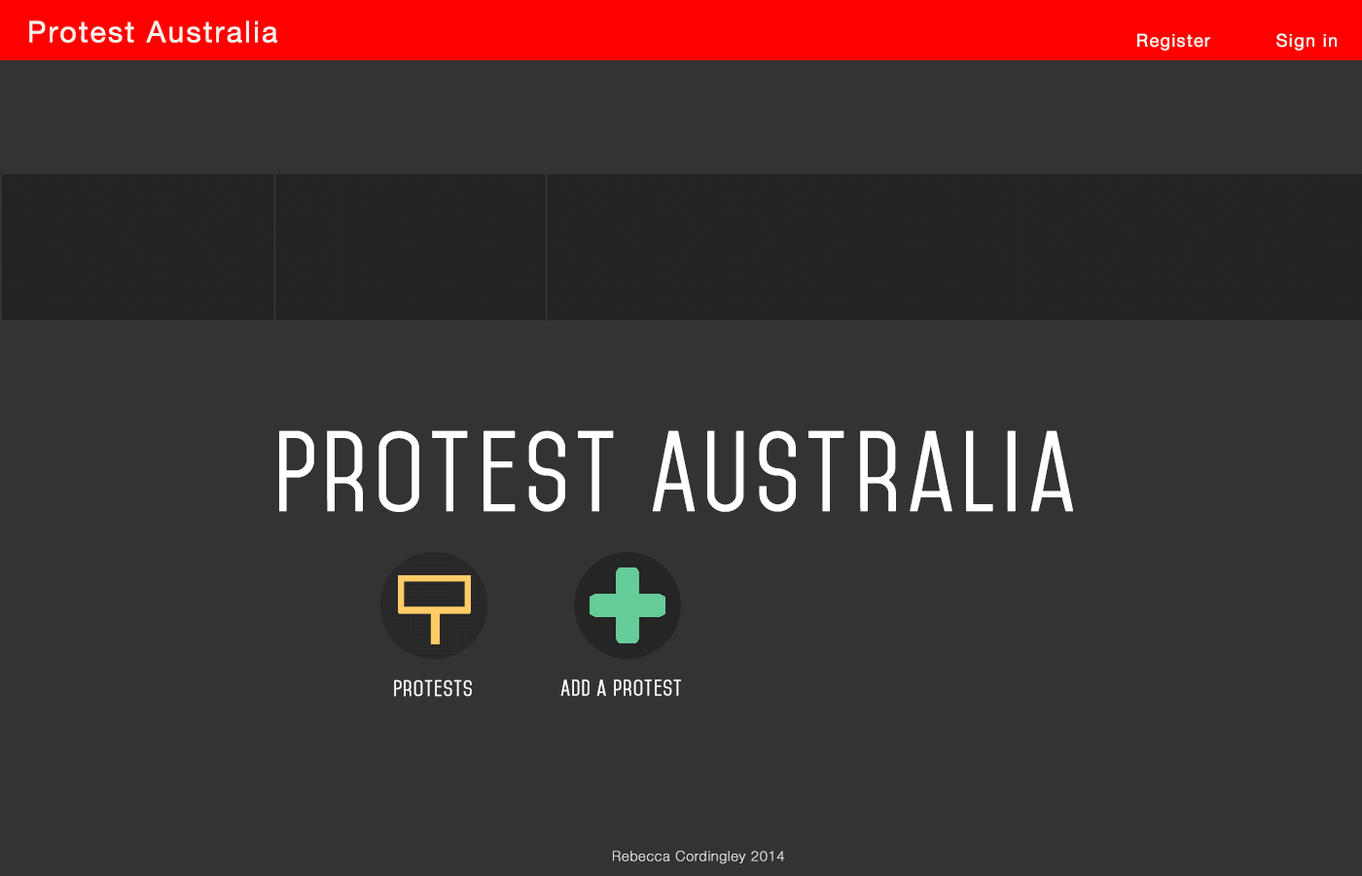
<style>
.page{position:relative;width:1362px;height:876px;background:#333333}
.page>*{position:absolute;margin:0}
.t1{font:29.2px "HelveticaNeue";letter-spacing:0.05em;color:#f2f2eb;font-weight:bold}
.t2{font:17.5px "HelveticaNeue";letter-spacing:0.05em;color:#f2f2eb;font-weight:bold}
.t3{font:97.3px "Mohave";letter-spacing:0.05em;color:#ffffff;font-weight:bold}
.t4{font:19.5px "Mohave";letter-spacing:0.05em;color:#ffffff;font-weight:bold}
.t5{font:13.6px "HelveticaNeue-Thin";letter-spacing:0.05em;color:#e7e7e7;font-weight:bold}
</style>
<div class="page">
<p class="t1" style="left:29px;top:20px;width:248px;height:23px">Protest Australia</p>
<p class="t2" style="left:1137px;top:33px;width:200px;height:18px">Register  Sign in</p>
<p class="t3" style="left:279px;top:430px;width:794px;height:82px">Protest Australia</p>
<p class="t4" style="left:394px;top:679px;width:78px;height:18px">Protests</p>
<p class="t4" style="left:560px;top:679px;width:121px;height:17px">Add a protest</p>
<p class="t5" style="left:613px;top:850px;width:172px;height:14px">Rebecca Cordingley 2014</p>
</div>
